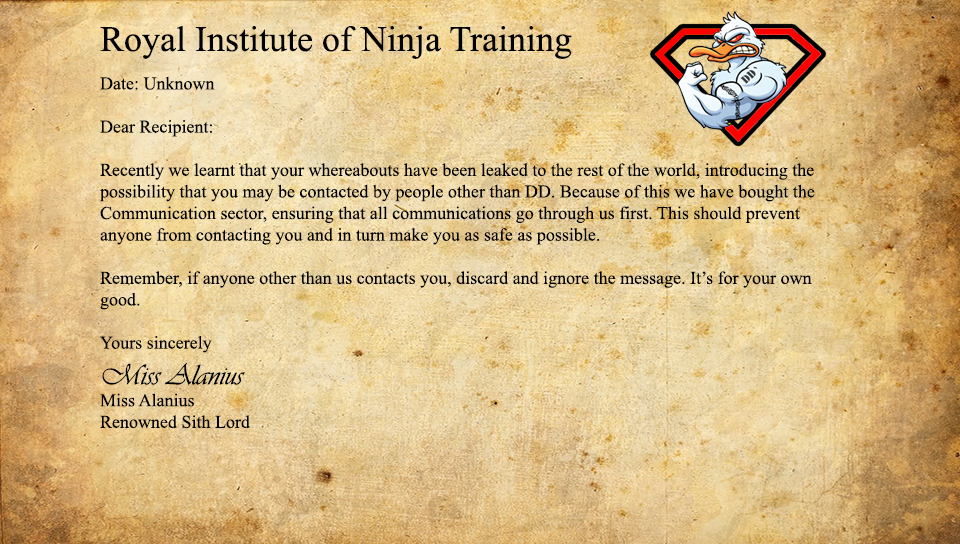
<style>
.page{position:relative;width:960px;height:544px}
.page>*{position:absolute;margin:0}
.t1{font:18px "TimesNewRomanPSMT";color:#000000}
.t2{font:36px "TimesNewRomanPSMT";color:#000000}
.t3{font:30px "Vivaldii";color:#000000}
</style>
<div class="page">
<p class="t1" style="left:99px;top:25px;width:716px;height:404px;text-align:right"><span class="t2">Royal Institute of Ninja Training<br><br></span>Date: Unknown<br><br>Dear Recipient:<br><br>Recently we learnt that your whereabouts have been leaked to the rest of the world, introducing the<br>possibility that you may be contacted by people other than DD. Because of this we have bought the<br>Communication sector, ensuring that all communications go through us first. This should prevent<br>anyone from contacting you and in turn make you as safe as possible.<br><br>Remember, if anyone other than us contacts you, discard and ignore the message. It’s for your own<br>good.<br><br>Yours sincerely<br><span class="t3">Miss Alanius<br></span>Miss Alanius<br>Renowned Sith Lord</p>
</div>
